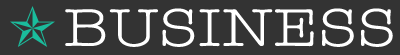
<style>
.page{position:relative;width:400px;height:55px;background:#333333}
.page>*{position:absolute;margin:0}
.t1{font:52px "AmericanTypewriter-Light";color:#ffffff;font-weight:bold;scale:1.23 1}
</style>
<div class="page">
<p class="t1" style="left:65px;top:8px;width:328px;height:39px">BUSINESS</p>
</div>
